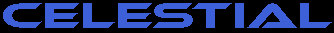
<style>
.page{position:relative;width:334px;height:33px;background:#000000}
.page>*{position:absolute;margin:0}
.t1{font:36.8px "EthnocentricRg-Regular";color:#3d5fd7;scale:1.2 1}
</style>
<div class="page">
<p class="t1" style="left:3px;top:3px;width:329px;height:25px">celestial</p>
</div>
